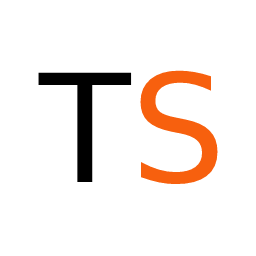
<style>
.page{position:relative;width:256px;height:256px;background:#ffffff}
.page>*{position:absolute;margin:0}
.t1{font:150px "DejaVuSans";color:#000000}
.t2{font:150px "DejaVuSans";color:#f7600e}
</style>
<div class="page">
<p class="t1" style="left:38px;top:70px;width:180px;height:115px">T<span class="t2">S</span></p>
</div>
